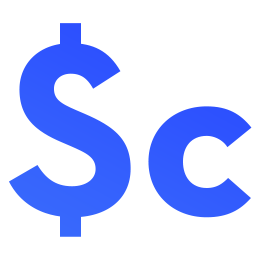
<style>
.page{position:relative;width:260px;height:260px;background:#ffffff}
.page>*{position:absolute;margin:0}
.t1{font:249.7px "NeutraText-Bold";letter-spacing:-0.005em;color:#325cfd}
</style>
<div class="page">
<p class="t1" style="left:8px;top:43px;width:244px;height:175px">Sc</p>
</div>
